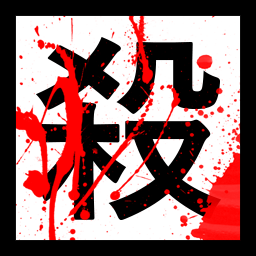
<style>
.page{position:relative;width:256px;height:256px;background:#000000}
.page>*{position:absolute;margin:0}
.t1{font:200px "YuGothicUI-Bold";color:#000000}
</style>
<div class="page">
<p class="t1" style="left:34px;top:37px;width:188px;height:183px">殺</p>
</div>
